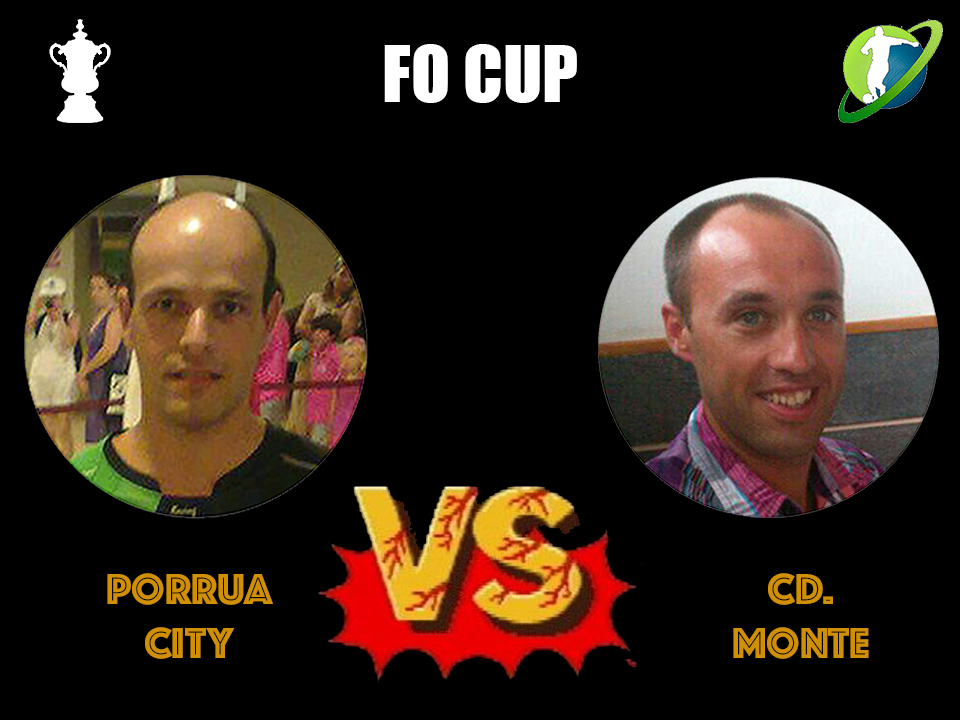
<style>
.page{position:relative;width:960px;height:720px;background:#000000}
.page>*{position:absolute;margin:0}
.t1{font:72px "Impact";color:#ffffff}
.t2{font:45px "Phosphate-Inline";color:#d19004}
</style>
<div class="page">
<p class="t1" style="left:384px;top:44px;width:193px;height:59px">FO CUP</p>
<p class="t2" style="left:107px;top:573px;width:166px;height:86px;text-align:center">PORRUA<br>CITY</p>
<p class="t2" style="left:733px;top:573px;width:136px;height:86px;text-align:center">CD.<br>MONTE</p>
</div>
